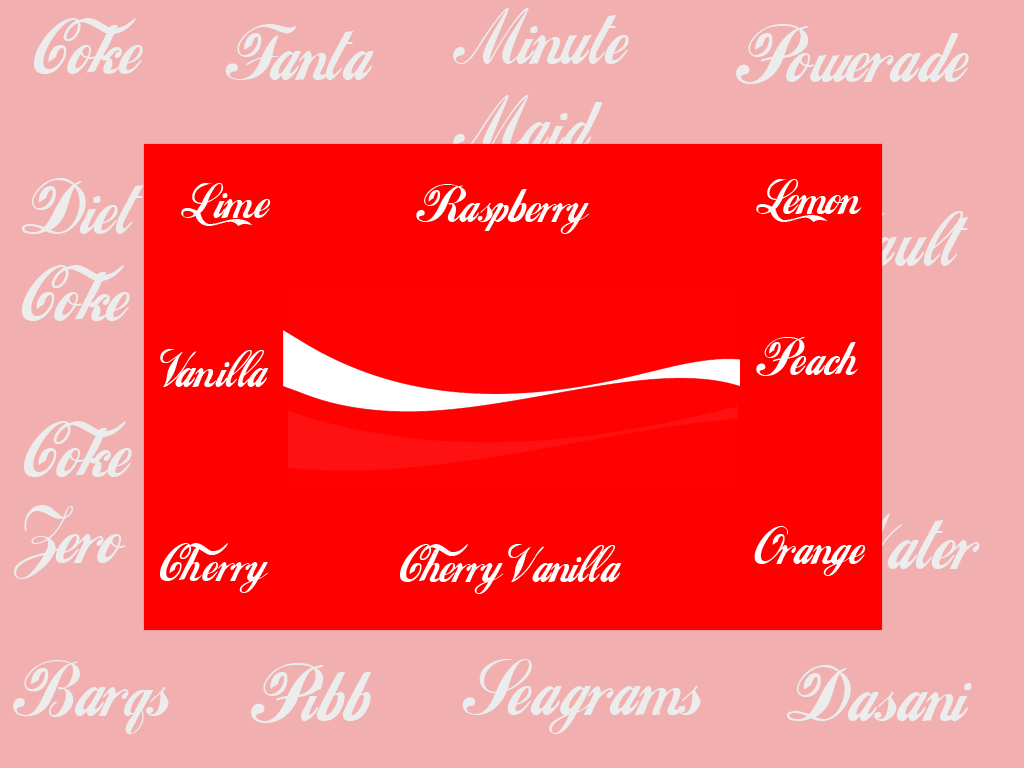
<style>
.page{position:relative;width:1024px;height:768px;background:#f1afaf}
.page>*{position:absolute;margin:0}
.t1{font:72px "LokiCola";color:#ebebeb}
.t2{font:48px "LokiCola";color:#ffffff}
</style>
<div class="page">
<p class="t1" style="left:453px;top:8px;width:176px;height:143px">Minute <br>Maid</p>
<p class="t1" style="left:33px;top:18px;width:110px;height:56px">Coke</p>
<p class="t1" style="left:225px;top:24px;width:149px;height:56px">Fanta</p>
<p class="t1" style="left:736px;top:24px;width:233px;height:60px">Powerade</p>
<p class="t1" style="left:21px;top:178px;width:123px;height:143px">Diet<br>Coke</p>
<p class="t2" style="left:181px;top:183px;width:90px;height:43px">Lime</p>
<p class="t2" style="left:416px;top:184px;width:174px;height:50px">Raspberry</p>
<p class="t2" style="left:756px;top:179px;width:106px;height:43px">Lemon</p>
<p class="t2" style="left:756px;top:337px;width:102px;height:39px">Peach</p>
<p class="t2" style="left:160px;top:349px;width:109px;height:38px">Vanilla</p>
<p class="t1" style="left:13px;top:421px;width:119px;height:158px">Coke<br>Zero</p>
<p class="t2" style="left:754px;top:526px;width:112px;height:50px">Orange</p>
<p class="t2" style="left:400px;top:544px;width:222px;height:50px">Cherry Vanilla</p>
<p class="t1" style="left:13px;top:660px;width:156px;height:74px">Barqs</p>
<p class="t1" style="left:251px;top:663px;width:120px;height:60px">Pibb</p>
<p class="t1" style="left:462px;top:659px;width:239px;height:75px">Seagrams</p>
<p class="t1" style="left:787px;top:665px;width:185px;height:56px">Dasani</p>
</div>
